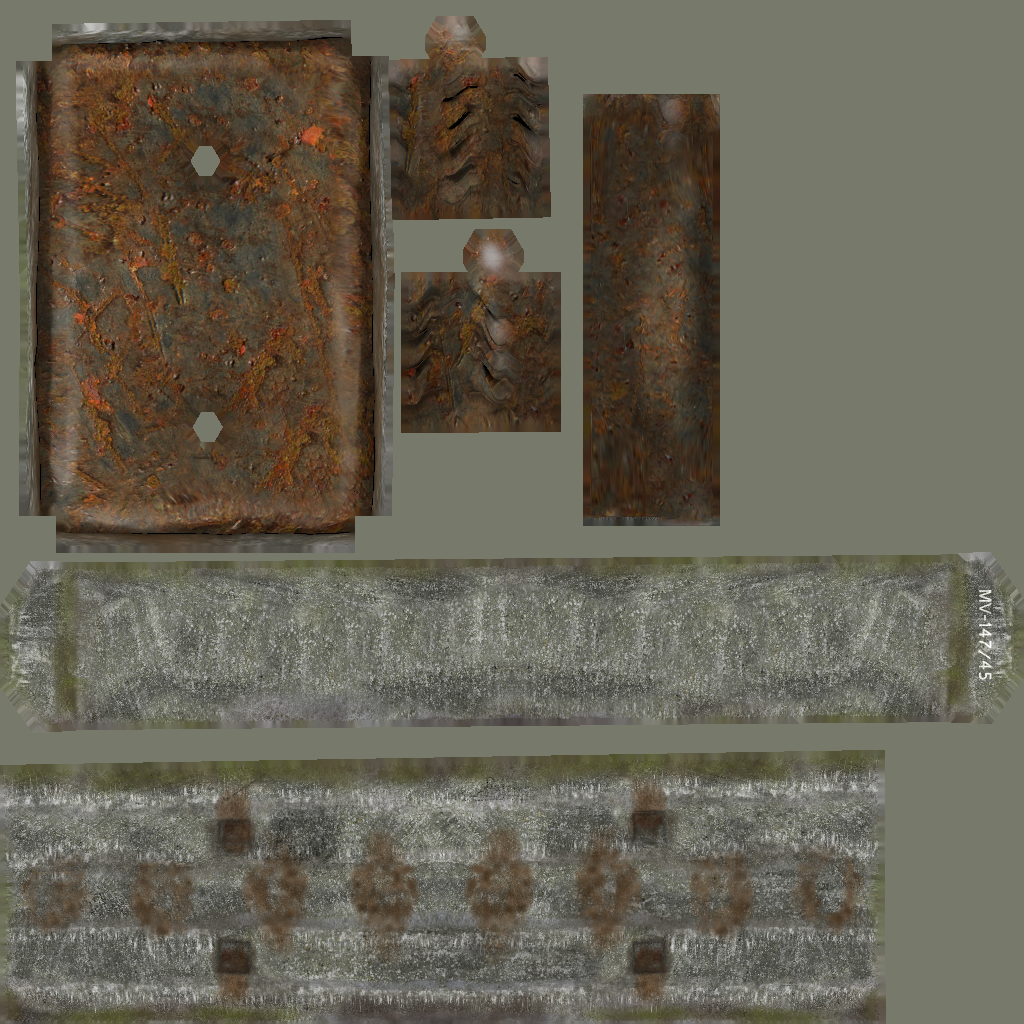
<style>
.page{position:relative;width:1024px;height:1024px;background:#777a6a}
.page>*{position:absolute;margin:0}
.t1{font:17.9px "Gautami";color:#eeefe8}
</style>
<div class="page">
<p class="t1" style="left:978px;top:590px;width:14px;height:90px;rotate:90deg">MV-147/45</p>
<p class="t1" style="left:978px;top:590px;width:14px;height:90px;rotate:90deg">MV-147/45</p>
</div>
